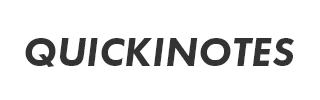
<style>
.page{position:relative;width:320px;height:100px;background:#ffffff}
.page>*{position:absolute;margin:0}
.t1{font:41.7px "FuturaPT-HeavyObl";color:#333333}
</style>
<div class="page">
<p class="t1" style="left:25px;top:38px;width:269px;height:29px">QUICKINOTES</p>
</div>
